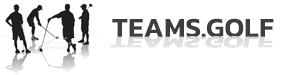
<style>
.page{position:relative;width:300px;height:75px;background:#ffffff}
.page>*{position:absolute;margin:0}
.t1{font:28px "Kanit-SemiBold";color:#3e3e3e}
</style>
<div class="page">
<p class="t1" style="left:112px;top:18px;width:162px;height:20px">TEAMS.GOLF</p>
</div>
